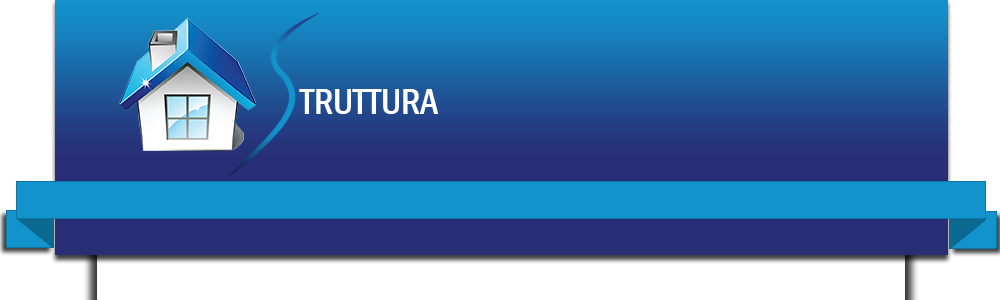
<style>
.page{position:relative;width:1000px;height:300px}
.page>*{position:absolute;margin:0}
.t1{font:36.6px "FranklinGothic-MediumCond";color:#ffffff}
</style>
<div class="page">
<p class="t1" style="left:299px;top:89px;width:140px;height:25px">TRUTTURA</p>
</div>
